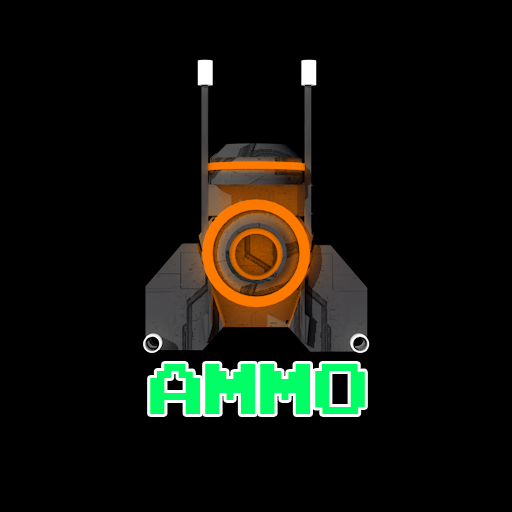
<style>
.page{position:relative;width:512px;height:512px;background:#000000}
.page>*{position:absolute;margin:0}
.t1{font:100px "ArcadeClassic";color:#00ff66}
</style>
<div class="page">
<p class="t1" style="left:150px;top:364px;width:215px;height:50px">Ammo</p>
</div>
